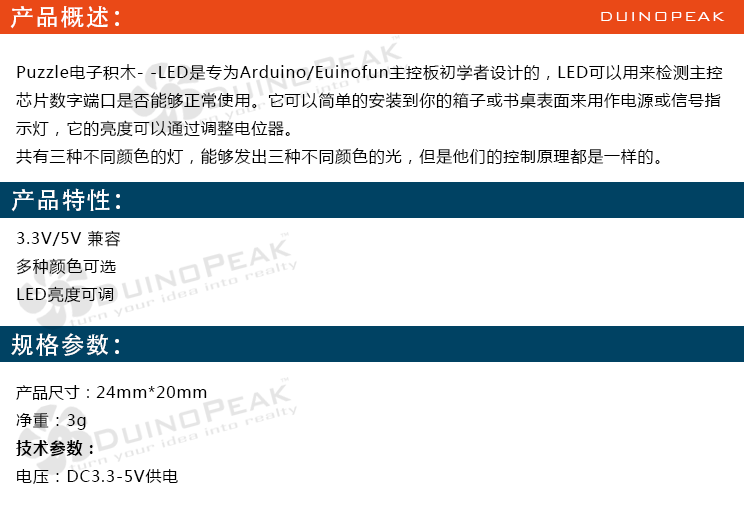
<style>
.page{position:relative;width:744px;height:510px;background:#ffffff}
.page>*{position:absolute;margin:0}
.t1{font:24px "AdobeHeitiStd-Regular";letter-spacing:0.05em;color:#ffffff}
.t2{font:18px "BankGothicBT-Light";letter-spacing:0.05em;color:#ffffff}
.t3{font:16px "MicrosoftYaHei";letter-spacing:0.05em;color:#000000}
.t4{font:16px "MicrosoftYaHei";color:#000000}
.t5{font:16px "MicrosoftYaHei-Bold";letter-spacing:0.05em;color:#000000}
</style>
<div class="page">
<p class="t1" style="left:10px;top:6px;width:109px;height:23px">产品概述：</p>
<p class="t2" style="left:601px;top:12px;width:124px;height:9px">DUINOPEAK</p>
<p class="t3" style="left:16px;top:64px;width:707px;height:101px">Puzzle电子积木- -LED是专为Arduino/Euinofun主控板初学者设计的，LED可以用来检测主控<br>芯片数字端口是否能够正常使用。它可以简单的安装到你的箱子或书桌表面来用作电源或信号指<br>示灯，它的亮度可以通过调整电位器。<br>共有三种不同颜色的灯，能够发出三种不同颜色的光，但是他们的控制原理都是一样的。</p>
<p class="t1" style="left:11px;top:188px;width:109px;height:24px">产品特性：</p>
<p class="t3" style="left:16px;top:230px;width:105px;height:73px">3.3V/5V 兼容<br>多种颜色可选<br>LED亮度可调</p>
<p class="t1" style="left:11px;top:333px;width:108px;height:23px">规格参数：</p>
<p class="t3" style="left:16px;top:385px;width:191px;height:99px"><span class="t4">产品尺寸：</span>24mm*20mm<br>净重：3g<br><span class="t5">技术参数：<br></span>电压：DC3.3-5V供电</p>
</div>
